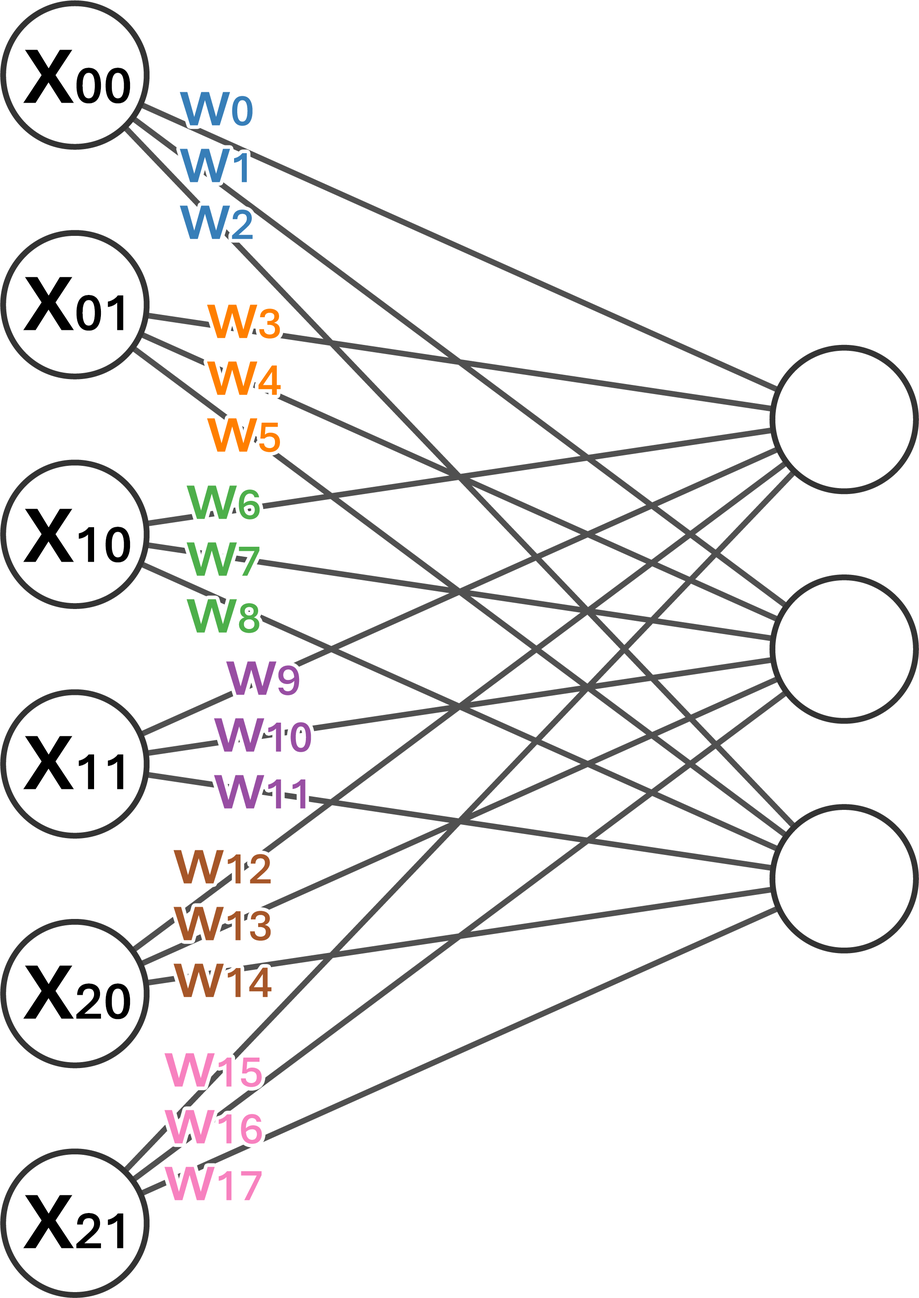
<style>
.page{position:relative;width:919px;height:1298px;background:#ffffff}
.page>*{position:absolute;margin:0}
.t1{font:54.5px "Aptos-SemiBold";color:#000000}
.t2{font:109.1px "Aptos-SemiBold";color:#000000}
.t3{font:68.2px/56.8px "Aptos-SemiBold";color:#377eb8}
.t4{font:45.4px/56.8px "Aptos-SemiBold";color:#377eb8}
.t5{font:68.2px/56.8px "Aptos-SemiBold";color:#ff7f00}
.t6{font:45.4px/56.8px "Aptos-SemiBold";color:#ff7f00}
.t7{font:68.2px/56.8px "Aptos-SemiBold";color:#4daf4a}
.t8{font:45.4px/56.8px "Aptos-SemiBold";color:#4daf4a}
.t9{font:45.4px/56.8px "Aptos-SemiBold";color:#984ea3}
.t10{font:68.2px/56.8px "Aptos-SemiBold";color:#984ea3}
.t11{font:45.4px/56.8px "Aptos-SemiBold";color:#a65628}
.t12{font:68.2px/56.8px "Aptos-SemiBold";color:#a65628}
.t13{font:45.4px/56.8px "Aptos-SemiBold";color:#f781bf}
.t14{font:68.2px/56.8px "Aptos-SemiBold";color:#f781bf}
</style>
<div class="page">
<p class="t1" style="left:23px;top:50px;width:107px;height:54px"><span class="t2">x</span>00</p>
<p class="t3" style="left:179px;top:92px;width:74px;height:147px;text-align:center">w<span class="t4">0<br></span>w<span class="t4">1<br></span>w<span class="t4">2</span></p>
<p class="t1" style="left:23px;top:277px;width:101px;height:54px"><span class="t2">x</span>01</p>
<p class="t5" style="left:207px;top:304px;width:74px;height:148px;text-align:center">w<span class="t6">3<br></span>w<span class="t6">4<br></span>w<span class="t6">5</span></p>
<p class="t7" style="left:186px;top:485px;width:74px;height:148px;text-align:center">w<span class="t8">6<br></span>w<span class="t8">7<br></span>w<span class="t8">8</span></p>
<p class="t1" style="left:23px;top:508px;width:107px;height:55px"><span class="t2">x</span>10</p>
<p class="t9" style="left:214px;top:661px;width:97px;height:147px;text-align:center"><span class="t10">w</span>9<br><span class="t10">w</span>10<br><span class="t10">w</span>11</p>
<p class="t1" style="left:23px;top:736px;width:101px;height:53px"><span class="t2">x</span>11</p>
<p class="t11" style="left:174px;top:850px;width:98px;height:147px;text-align:center"><span class="t12">w</span>12<br><span class="t12">w</span>13<br><span class="t12">w</span>14</p>
<p class="t1" style="left:23px;top:965px;width:107px;height:54px"><span class="t2">x</span>20</p>
<p class="t13" style="left:164px;top:1053px;width:98px;height:147px;text-align:center"><span class="t14">w</span>15<br><span class="t14">w</span>16<br><span class="t14">w</span>17</p>
<p class="t1" style="left:23px;top:1195px;width:101px;height:53px"><span class="t2">x</span>21</p>
</div>
